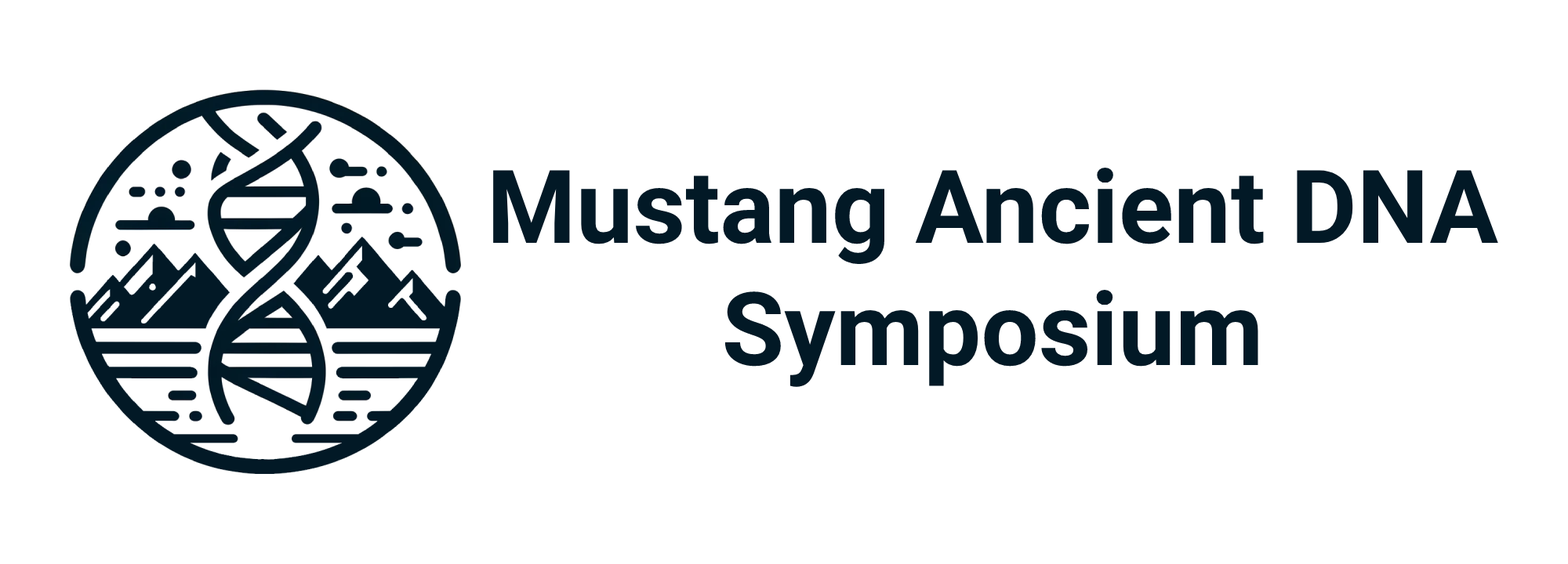
<style>
.page{position:relative;width:1568px;height:564px;background:#ffffff}
.page>*{position:absolute;margin:0}
.t1{font:101.9px "Roboto-Bold";color:#021926}
</style>
<div class="page">
<p class="t1" style="left:493px;top:168px;width:1005px;height:219px;text-align:center">Mustang Ancient DNA<br>Symposium</p>
</div>
